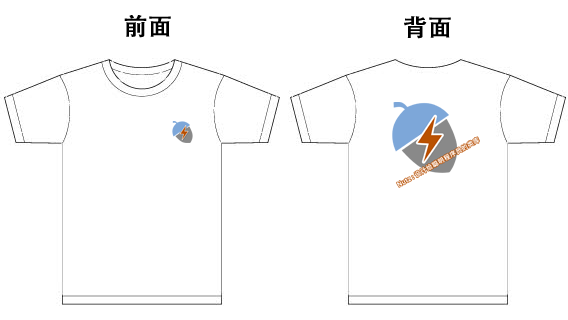
<style>
.page{position:relative;width:568px;height:320px;background:#ffffff}
.page>*{position:absolute;margin:0}
.t1{font:24px "AdobeHeitiStd-Regular";color:#000000;font-weight:bold}
</style>
<div class="page">
<p class="t1" style="left:124px;top:15px;width:47px;height:23px">前面</p>
<p class="t1" style="left:404px;top:16px;width:47px;height:23px">背面</p>
</div>
